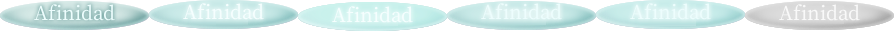
<style>
.page{position:relative;width:894px;height:31px;background:#ffffff}
.page>*{position:absolute;margin:0}
.t1{font:23px "OfficialFateFont-Medium";color:#edfdfd}
.t2{font:23px "OfficialFateFont-Medium";color:#f5fefe}
.t3{font:23px "OfficialFateFont-Medium";color:#f9f9f9}
</style>
<div class="page">
<p class="t1" style="left:34px;top:4px;width:81px;height:17px">Afinidad</p>
<p class="t2" style="left:183px;top:3px;width:81px;height:17px">Afinidad</p>
<p class="t2" style="left:332px;top:6px;width:81px;height:17px">Afinidad</p>
<p class="t1" style="left:481px;top:3px;width:81px;height:17px">Afinidad</p>
<p class="t1" style="left:630px;top:3px;width:81px;height:17px">Afinidad</p>
<p class="t3" style="left:779px;top:4px;width:81px;height:17px">Afinidad</p>
</div>
